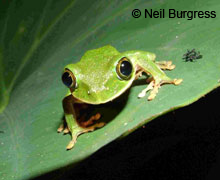
<style>
.page{position:relative;width:220px;height:180px}
.page>*{position:absolute;margin:0}
.t1{font:12px "ArialMT";color:#000000}
</style>
<div class="page">
<p class="t1" style="left:131px;top:9px;width:85px;height:11px">© Neil Burgress</p>
</div>
